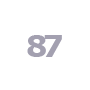
<style>
.page{position:relative;width:90px;height:90px;background:#ffffff}
.page>*{position:absolute;margin:0}
.t1{font:30px "Verdana-Bold";letter-spacing:-0.15em;color:#a3a0b0}
</style>
<div class="page">
<p class="t1" style="left:27px;top:35px;width:35px;height:22px">87</p>
</div>
